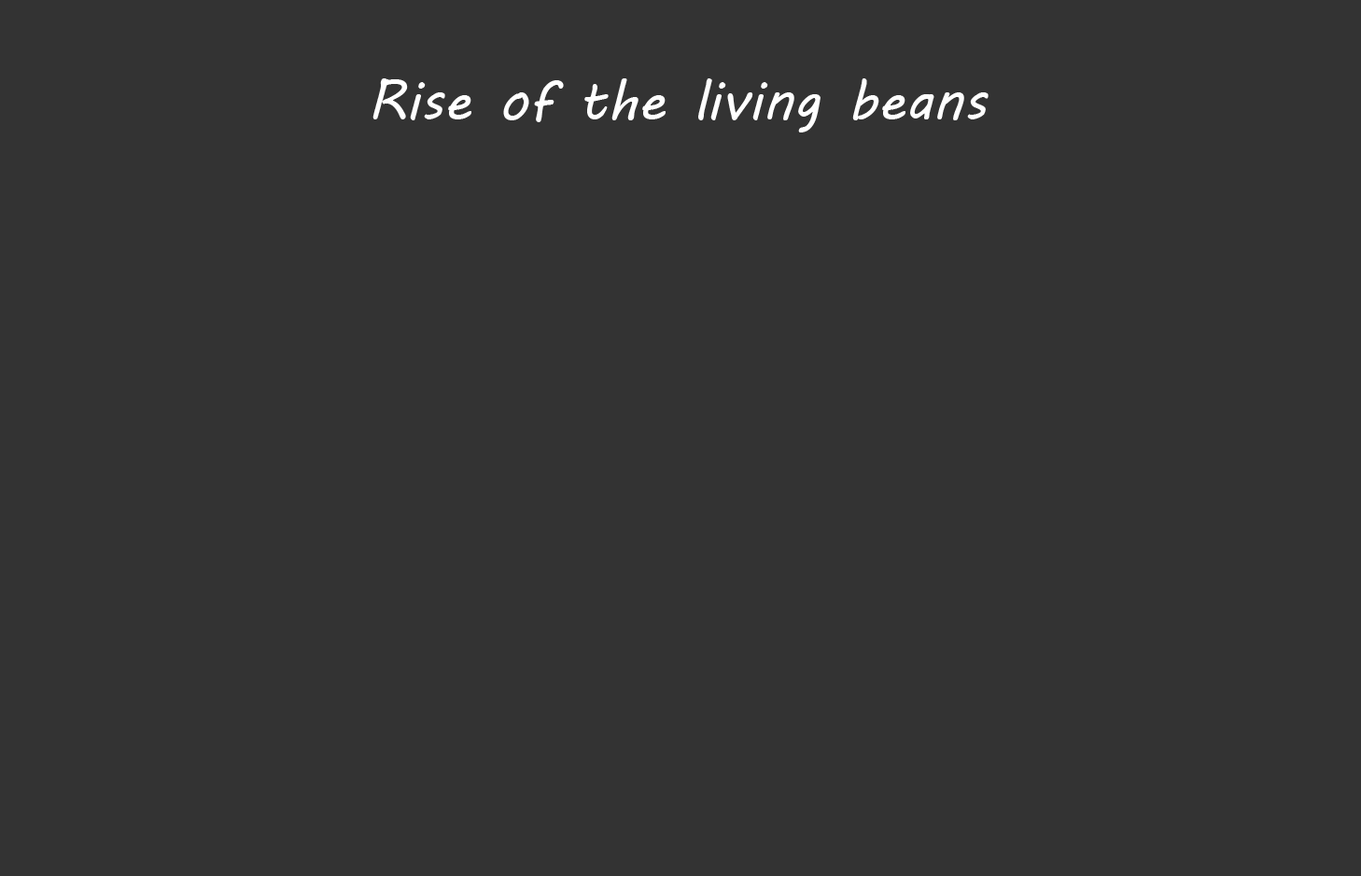
<style>
.page{position:relative;width:1361px;height:876px;background:#333333}
.page>*{position:absolute;margin:0}
.t1{font:56px "MVBoli";color:#ffffff}
</style>
<div class="page">
<p class="t1" style="left:372px;top:78px;width:616px;height:55px">Rise of the living beans</p>
</div>
